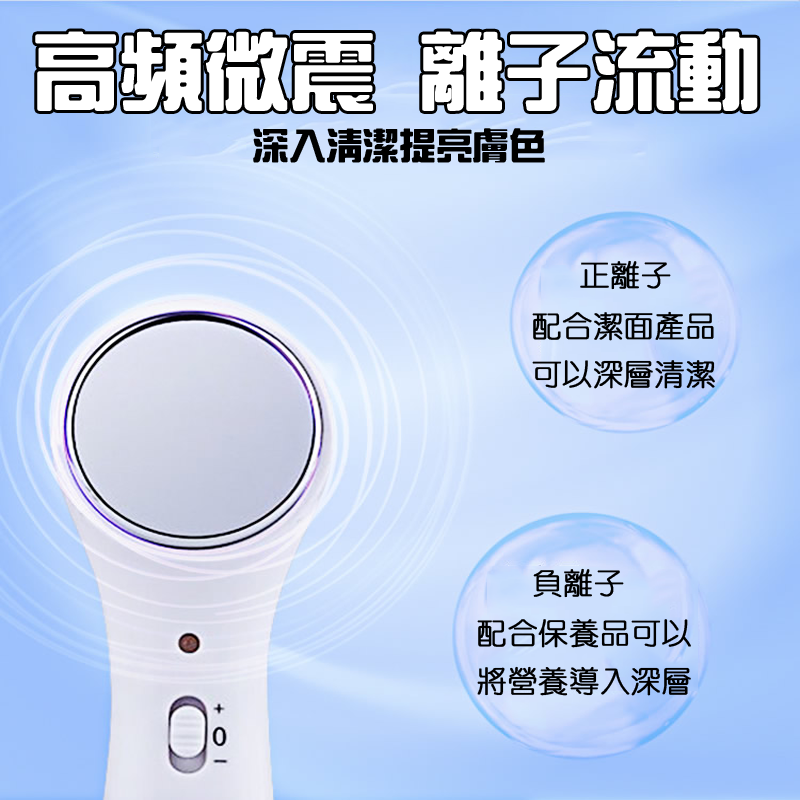
<style>
.page{position:relative;width:800px;height:800px}
.page>*{position:absolute;margin:0}
.t1{font:83.3px "HanWangZonYi";color:#ffffff;font-weight:bold}
.t2{font:35.7px "HanWangZonYi";color:#000000;font-weight:bold}
.t3{font:30px "HanWangYenLight";color:#000000;font-weight:bold}
</style>
<div class="page">
<p class="t1" style="left:35px;top:31px;width:723px;height:80px">高頻微震 離子流動</p>
<p class="t2" style="left:253px;top:128px;width:292px;height:35px">深入清潔提亮膚色</p>
<p class="t3" style="left:580px;top:260px;width:91px;height:30px">正離子</p>
<p class="t3" style="left:532px;top:311px;width:183px;height:78px">配合潔面產品<br>可以深層清潔</p>
<p class="t3" style="left:533px;top:568px;width:91px;height:30px">負離子</p>
<p class="t3" style="left:477px;top:619px;width:214px;height:77px">配合保養品可以<br>將營養導入深層</p>
</div>
